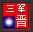
<style>
.page{position:relative;width:33px;height:32px;background:#f20000}
.page>*{position:absolute;margin:0}
.t1{font:10.4px "SimSun";color:#ffffff}
.t2{font:11.7px "SimSun";color:#ffffff}
</style>
<div class="page">
<p class="t1" style="left:6px;top:4px;width:19px;height:8px">三军</p>
<p class="t2" style="left:16px;top:15px;width:11px;height:12px">晋</p>
</div>
